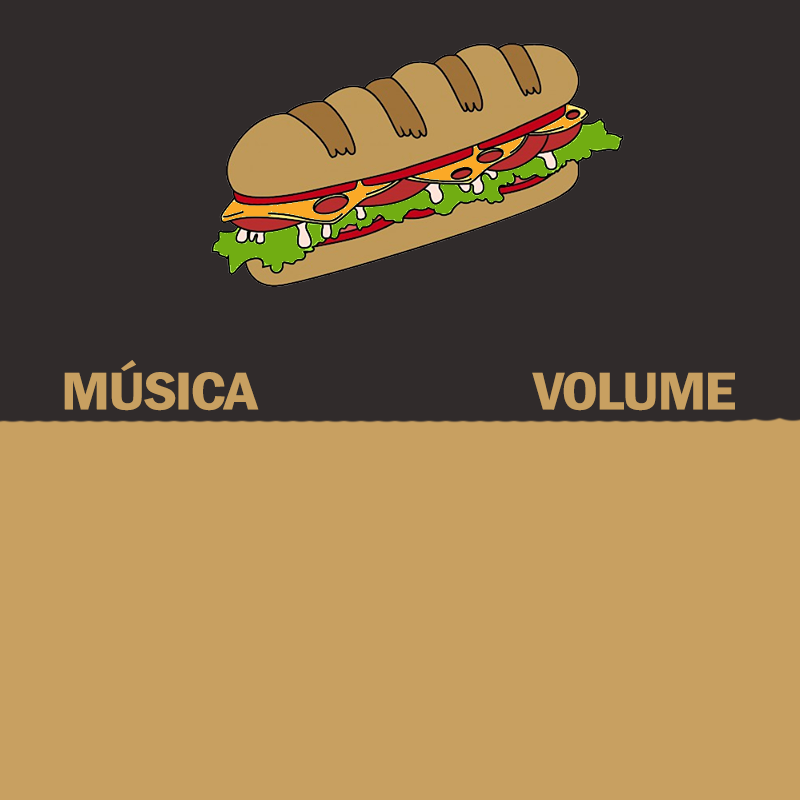
<style>
.page{position:relative;width:800px;height:800px;background:#c8a061}
.page>*{position:absolute;margin:0}
.t1{font:93.4px "FranklinGothic-DemiCond";letter-spacing:-0.06em;color:#c8a061;font-weight:bold;scale:1.2 1}
</style>
<div class="page">
<p class="t1" style="left:64px;top:360px;width:195px;height:51px">MÚSICA</p>
<p class="t1" style="left:532px;top:372px;width:203px;height:39px">VOLUME</p>
</div>
